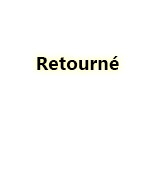
<style>
.page{position:relative;width:155px;height:179px;background:#ffffff}
.page>*{position:absolute;margin:0}
.t1{font:19.3px "LaoUI-Bold";color:#000000}
</style>
<div class="page">
<p class="t1" style="left:37px;top:56px;width:82px;height:14px">Retourné</p>
</div>
